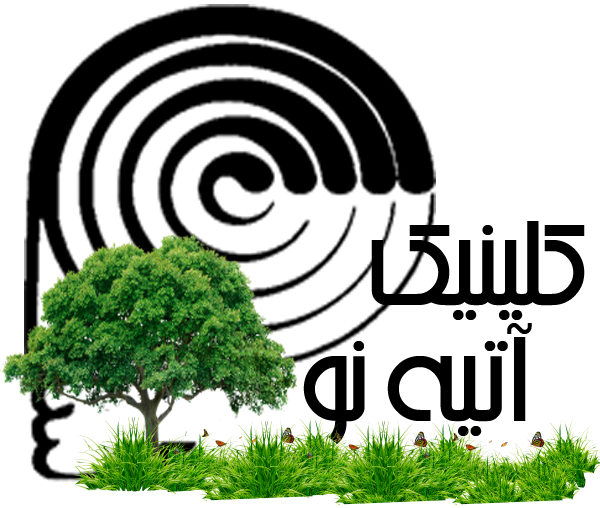
<style>
.page{position:relative;width:600px;height:508px;background:#ffffff}
.page>*{position:absolute;margin:0}
.t1{font:150px "Arshia";color:#000000}
</style>
<div class="page">
<p class="t1" style="left:371px;top:221px;width:214px;height:99px">کلينيک</p>
<p class="t1" style="left:303px;top:323px;width:229px;height:121px">آتيه نو</p>
</div>
